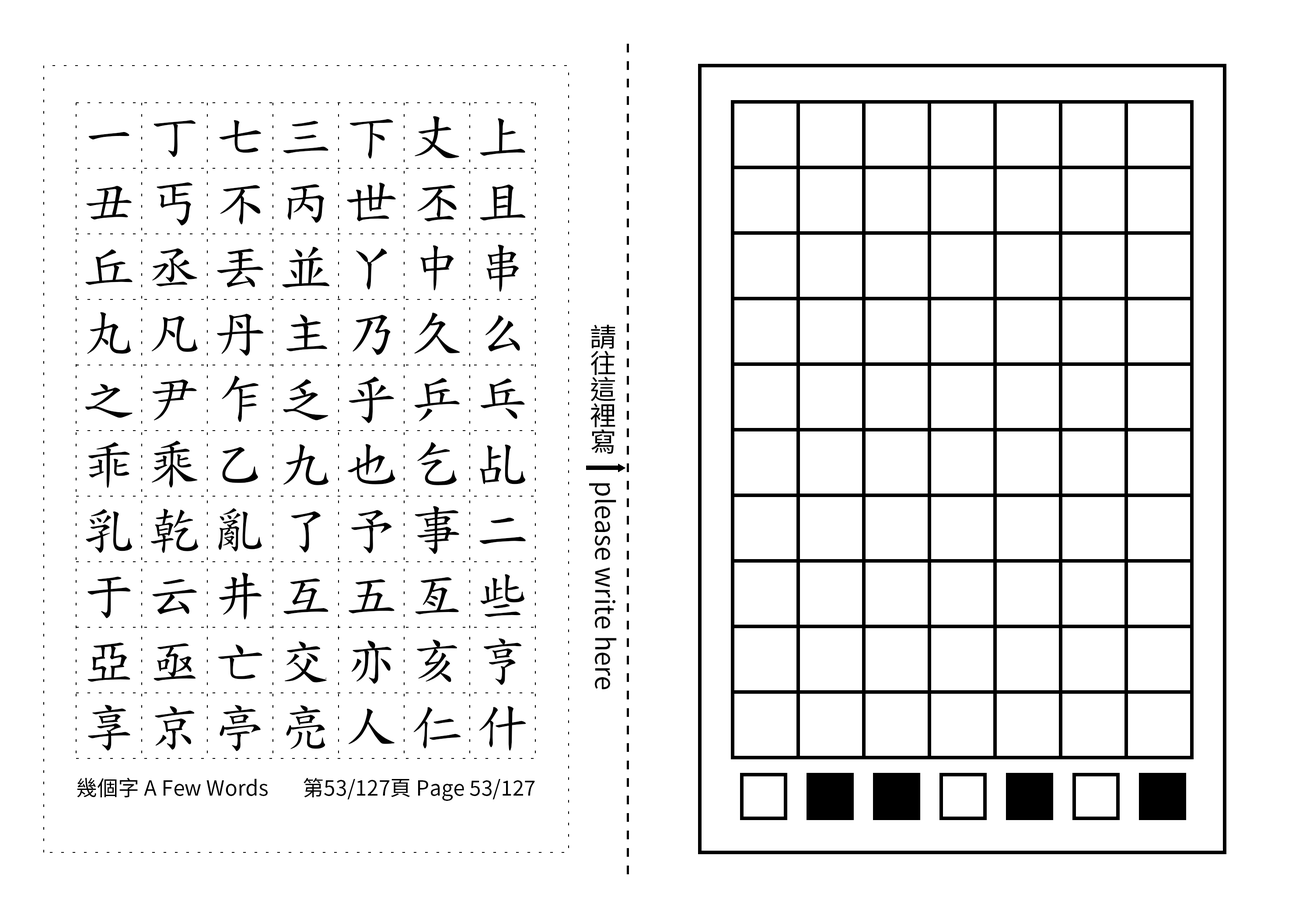
<style>
.page{position:relative;width:1299px;height:918px;background:#ffffff}
.page>*{position:absolute;margin:0}
.t1{font:52.5px/65.6px "TW-Kai-98_1";letter-spacing:0.25em;color:#000000}
.t2{font:26.2px "SourceHanSansTC-Regular";color:#000000}
.t3{font:21px "SourceHanSansTC-Regular";color:#000000}
</style>
<div class="page">
<p class="t1" style="left:85px;top:116px;width:441px;height:636px;text-align:center">一丁七三下丈上丑丐不丙世丕且丘丞丟並丫中串丸凡丹主乃久么之尹乍乏乎乒乓乖乘乙九也乞乩乳乾亂了予事二于云井互五亙些亞亟亡交亦亥亨享京亭亮人仁什</p>
<p class="t2" style="left:589px;top:324px;width:28px;height:366px;text-align:center">請往這裡寫　please write here</p>
<p class="t3" style="left:77px;top:778px;width:191px;height:20px">幾個字 A Few Words</p>
<p class="t3" style="left:303px;top:778px;width:232px;height:23px">第53/127頁 Page 53/127</p>
</div>
